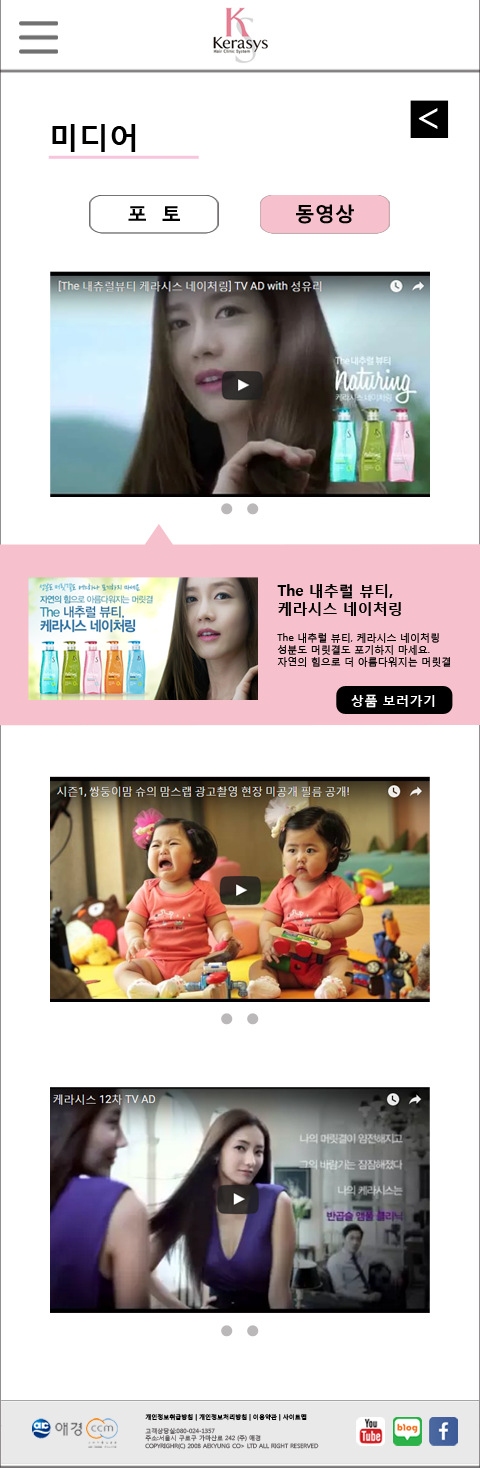
<style>
.page{position:relative;width:480px;height:1468px;background:#ffffff}
.page>*{position:absolute;margin:0}
.t1{font:43.2px "MalgunGothicRegular";color:#ffffff}
.t2{font:30px "MalgunGothicBold";color:#000000}
.t3{font:20px "MalgunGothicBold";color:#000000}
.t4{font:15px "MalgunGothicBold";color:#000000}
.t5{font:10px "MalgunGothicRegular";color:#000000}
.t6{font:13.5px "MalgunGothicBold";color:#ffffff}
.t7{font:6px "MalgunGothicRegular";color:#6e6b6b}
.t8{font:6px "MalgunGothicRegular";color:#000000}
</style>
<div class="page">
<p class="t1" style="left:418px;top:108px;width:20px;height:21px">&lt;</p>
<p class="t2" style="left:52px;top:124px;width:84px;height:28px">미디어</p>
<p class="t3" style="left:128px;top:206px;width:52px;height:15px">포  토</p>
<p class="t3" style="left:296px;top:204px;width:58px;height:20px">동영상</p>
<p class="t4" style="left:277px;top:584px;width:124px;height:32px">The 내추럴 뷰티, <br>케라시스 네이처링</p>
<p class="t5" style="left:277px;top:633px;width:174px;height:34px">The 내추럴 뷰티, 케라시스 네이처링<br>성분도 머릿결도 포기하지 마세요.<br>자연의 힘으로 더 아름다워지는 머릿결</p>
<p class="t6" style="left:351px;top:694px;width:84px;height:14px">상품 보러가기</p>
<p class="t7" style="left:145px;top:1414px;width:174px;height:36px;text-align:justify"><span class="t8">개인정보취급방침 | 개인정보처리방침 | 이용약관 | 사이트맵<br><br></span>고객상당실:080-024-1357<br>주소:서울시 구로구 가마산로 242 (주) 애경<br>COPYRIGHR(C) 2008 AEKYUNG CO&gt; LTD ALL RIGHT RESERVED</p>
</div>
